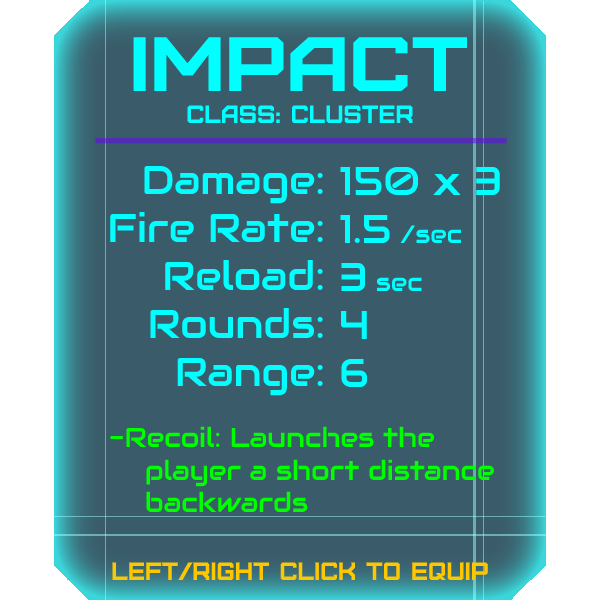
<style>
.page{position:relative;width:600px;height:600px;background:#3a5c6a}
.page>*{position:absolute;margin:0}
.t1{font:76.8px "Furore";color:#00ffff;scale:1.13 1}
.t2{font:25px "Furore";color:#00ffff}
.t3{font:40px "Audiowide-Regular";color:#00ffff}
.t4{font:25px "Audiowide-Regular";color:#00ffff}
.t5{font:27px "Audiowide-Regular";color:#00ff00}
.t6{font:25px "Furore";color:#ffc700}
</style>
<div class="page">
<p class="t1" style="left:133px;top:37px;width:335px;height:54px">Impact</p>
<p class="t2" style="left:187px;top:105px;width:226px;height:18px">Class: Cluster</p>
<p class="t3" style="left:110px;top:165px;width:213px;height:231px;text-align:right">Damage:<br>Fire Rate:<br>Reload:<br>Rounds:<br>Range:</p>
<p class="t3" style="left:340px;top:166px;width:160px;height:221px">150 x 3<br>1.5 <span class="t4">/sec<br></span>3 <span class="t4">sec<br></span>4<br>6</p>
<p class="t5" style="left:110px;top:426px;width:384px;height:86px">-Recoil: Launches the<br> player a short distance<br> backwards</p>
<p class="t6" style="left:112px;top:562px;width:376px;height:18px">left/right click to equip</p>
</div>
